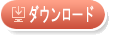
<style>
.page{position:relative;width:113px;height:36px;background:#ffffff}
.page>*{position:absolute;margin:0}
.t1{font:19px "MS-Gothic";color:#ffffff;text-transform:uppercase;scale:0.58 1}
</style>
<div class="page">
<p class="t1" style="left:29px;top:5px;width:65px;height:18px">ダウンロード</p>
</div>
